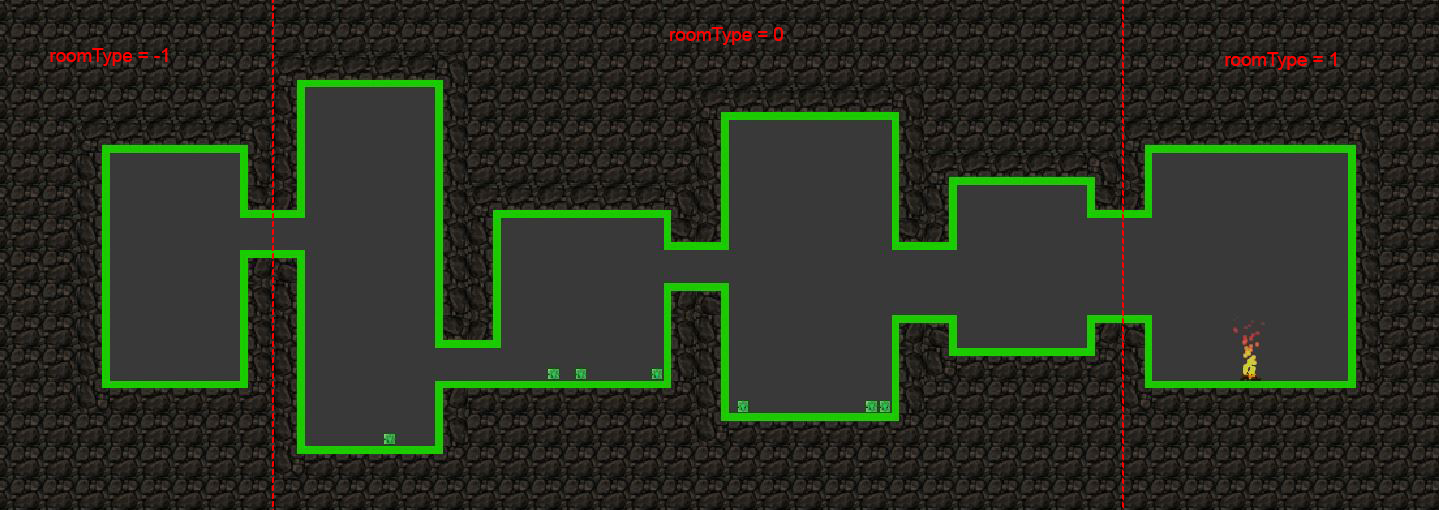
<style>
.page{position:relative;width:1439px;height:510px;background:#393939}
.page>*{position:absolute;margin:0}
.t1{font:18.7px "ArialMT";color:#ff0000}
</style>
<div class="page">
<p class="t1" style="left:670px;top:27px;width:113px;height:18px">roomType = 0</p>
<p class="t1" style="left:50px;top:48px;width:118px;height:18px">roomType = -1</p>
<p class="t1" style="left:1225px;top:52px;width:111px;height:18px">roomType = 1</p>
</div>
